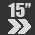
<style>
.page{position:relative;width:35px;height:35px;background:#333333}
.page>*{position:absolute;margin:0}
.t1{font:18px "Impact";color:#d9d9d9}
</style>
<div class="page">
<p class="t1" style="left:8px;top:3px;width:23px;height:14px">15’’</p>
</div>
